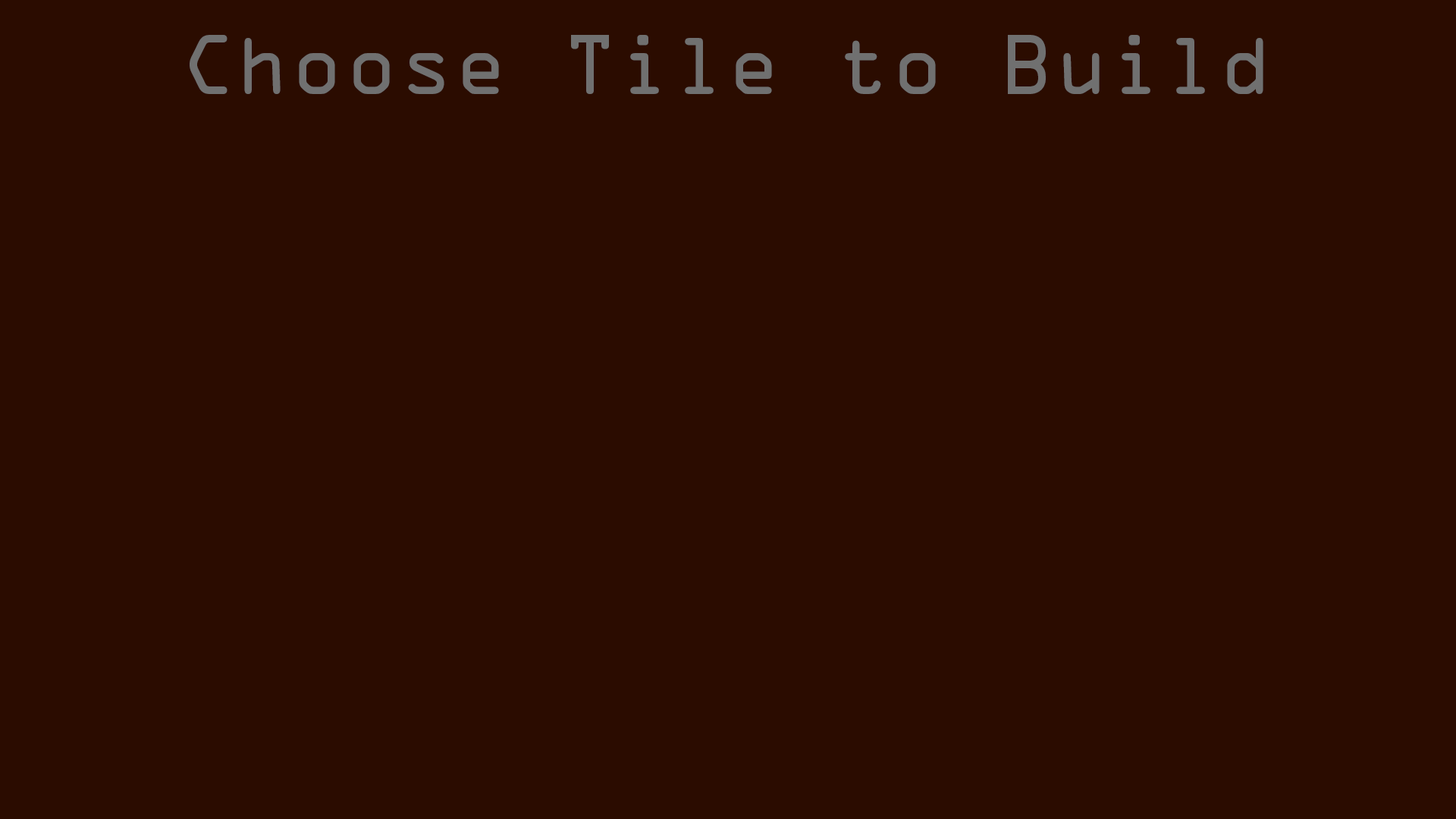
<style>
.page{position:relative;width:1456px;height:819px;background:#2b0c00}
.page>*{position:absolute;margin:0}
.t1{font:75.8px "OCRAStd";color:#707070}
</style>
<div class="page">
<p class="t1" style="left:190px;top:35px;width:1073px;height:59px">Choose Tile to Build</p>
</div>
